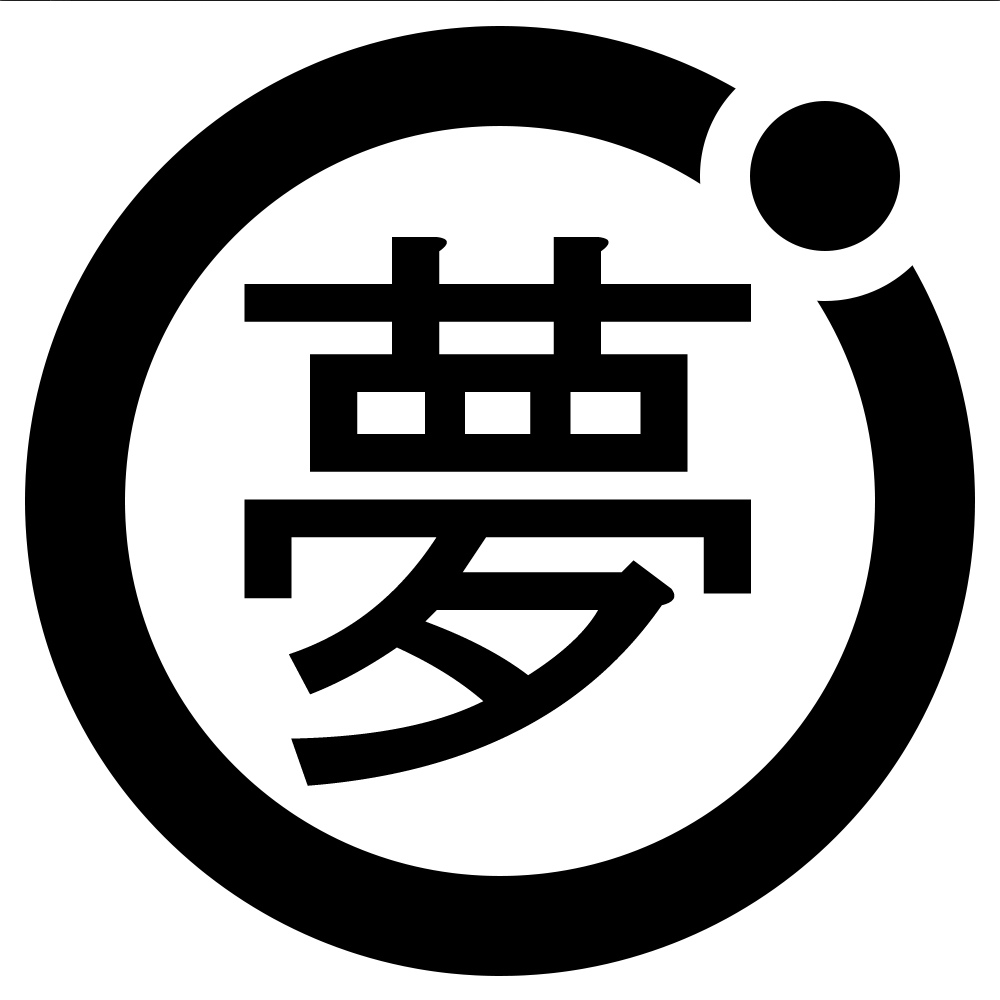
<style>
.page{position:relative;width:1000px;height:1000px;background:#ffffff}
.page>*{position:absolute;margin:0}
.t1{font:600px "MS-Gothic";color:#000000}
</style>
<div class="page">
<p class="t1" style="left:244px;top:236px;width:507px;height:549px">夢</p>
</div>
